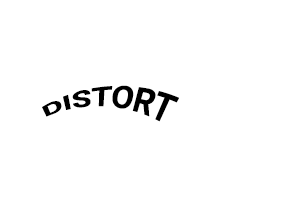
<style>
.page{position:relative;width:300px;height:200px;background:#ffffff}
.page>*{position:absolute;margin:0}
.t1{font:28px "Roboto-Bold";color:#000000}
</style>
<div class="page">
<p class="t1" style="left:42px;top:85px;width:137px;height:37px">DISTORT</p>
</div>
